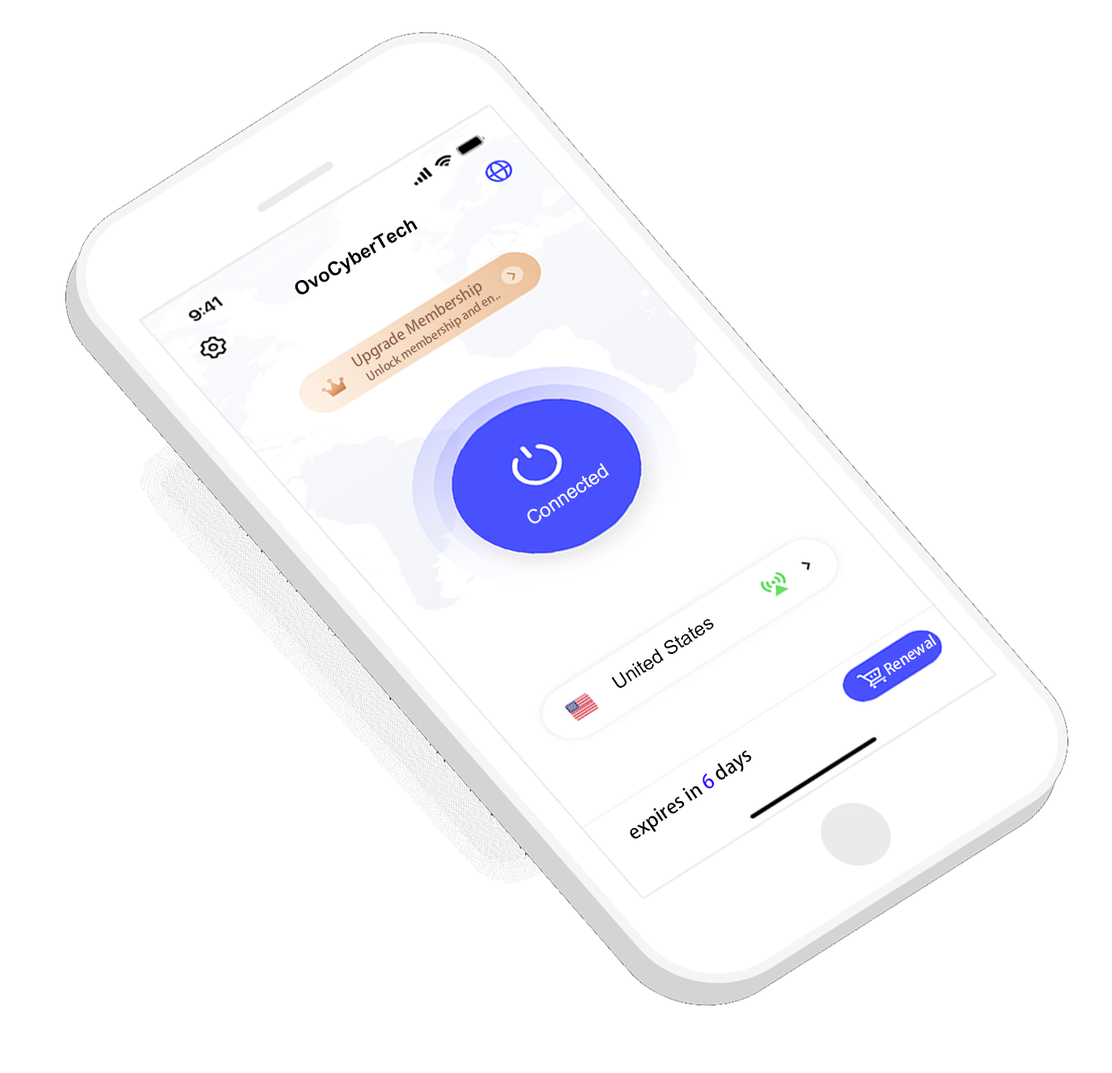
<style>
.page{position:relative;width:1112px;height:1073px;background:#ffffff}
.page>*{position:absolute;margin:0}
.t1{font:19.4px "Arial-BoldMT";color:#000000}
.t2{font:15.1px "AdobeHeitiStd-Regular";color:#926351}
.t3{font:12px "AdobeHeitiStd-Regular";color:#926351}
.t4{font:19.4px "ArialMT";color:#ffffff}
.t5{font:19.4px "ArialMT";color:#000000}
.t6{font:15.1px "AdobeHeitiStd-Regular";color:#ffffff}
.t7{font:19.4px "AdobeHeitiStd-Regular";color:#000000}
.t8{font:19.4px "AdobeHeitiStd-Regular";color:#2a00ff}
</style>
<div class="page">
<p class="t1" style="left:294px;top:219px;width:123px;height:75px;rotate:-30deg">OvoCyberTech</p>
<p class="t2" style="left:350px;top:283px;width:132px;height:83px;rotate:-32deg">Upgrade Membership</p>
<p class="t3" style="left:365px;top:295px;width:136px;height:85px;rotate:-33deg">Unlock membership and en..</p>
<p class="t4" style="left:527px;top:463px;width:82px;height:60px;rotate:-34deg">Connected</p>
<p class="t5" style="left:611px;top:619px;width:103px;height:69px;rotate:-33deg">United States</p>
<p class="t6" style="left:883px;top:633px;width:53px;height:43px;rotate:-33deg">Renewal</p>
<p class="t7" style="left:629px;top:750px;width:123px;height:89px;rotate:-35deg">expires in <span class="t8">6 </span>days</p>
</div>
